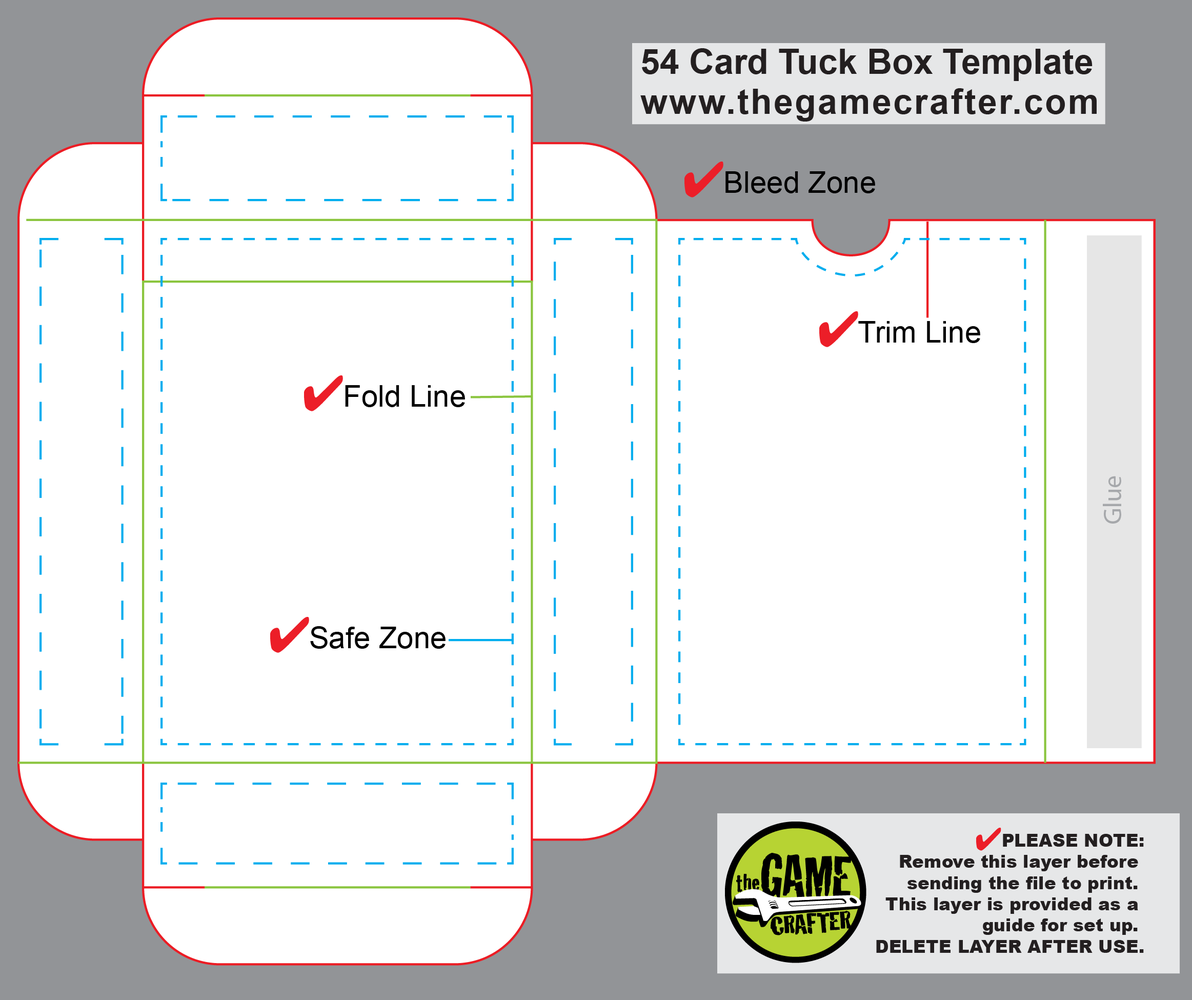
<style>
.page{position:relative;width:1192px;height:1000px;background:#ffffff}
.page>*{position:absolute;margin:0}
.t1{font:34.9px/39.9px "Arial-BoldMT";color:#231f20}
.t2{font:34.9px/39.9px "Arial-BoldMT";letter-spacing:0.05em;color:#231f20}
.t3{font:29.9px "ArialMT";color:#000000}
.t4{font:25.6px "MyriadPro-Regular";color:#a6a8ab}
.t5{font:17.7px "Arial-Black";color:#231f20}
</style>
<div class="page">
<p class="t1" style="left:641px;top:48px;width:456px;height:74px">54 Card Tuck Box Template<br><span class="t2">www.thegamecrafter.com</span></p>
<p class="t3" style="left:726px;top:171px;width:149px;height:22px">Bleed Zone</p>
<p class="t3" style="left:859px;top:321px;width:122px;height:22px">Trim Line</p>
<p class="t3" style="left:345px;top:385px;width:120px;height:22px">Fold Line</p>
<p class="t4" style="left:1103px;top:476px;width:19px;height:48px">Glue</p>
<p class="t3" style="left:310px;top:626px;width:136px;height:23px">Safe Zone</p>
<p class="t5" style="left:876px;top:834px;width:268px;height:119px;text-align:right">PLEASE NOTE:<br>Remove this layer before <br>sending the file to print. <br>This layer is provided as a <br>guide for set up. <br>DELETE LAYER AFTER USE.</p>
</div>
